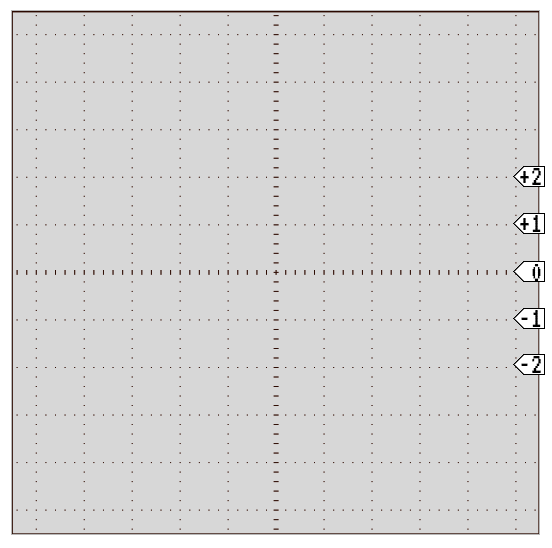
<style>
.page{position:relative;width:552px;height:548px;background:#d7d7d7}
.page>*{position:absolute;margin:0}
.t1{font:30px "VT323-Regular";color:#000000}
</style>
<div class="page">
<p class="t1" style="left:520px;top:168px;width:21px;height:17px">+2</p>
<p class="t1" style="left:520px;top:215px;width:21px;height:17px">+1</p>
<p class="t1" style="left:532px;top:264px;width:9px;height:17px">0</p>
<p class="t1" style="left:521px;top:310px;width:20px;height:17px">-1</p>
<p class="t1" style="left:521px;top:356px;width:20px;height:17px">-2</p>
</div>
